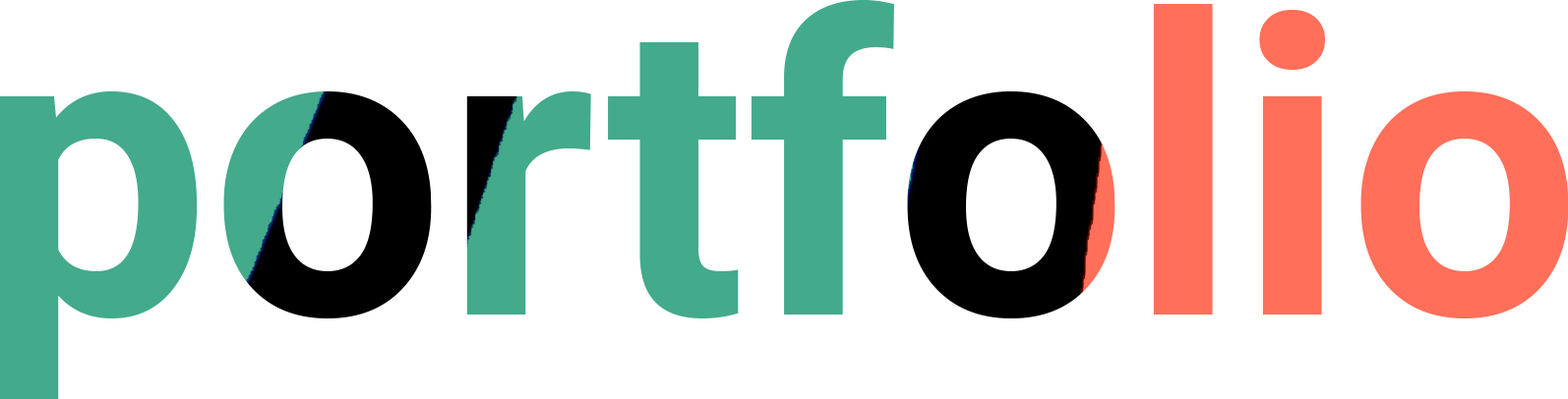
<style>
.page{position:relative;width:1568px;height:399px;background:#ffffff}
.page>*{position:absolute;margin:0}
.t1{font:414px "Roboto-Bold"}
</style>
<div class="page">
<p class="t1" style="left:0px;top:0px;width:1569px;height:399px">portfolio</p>
</div>
